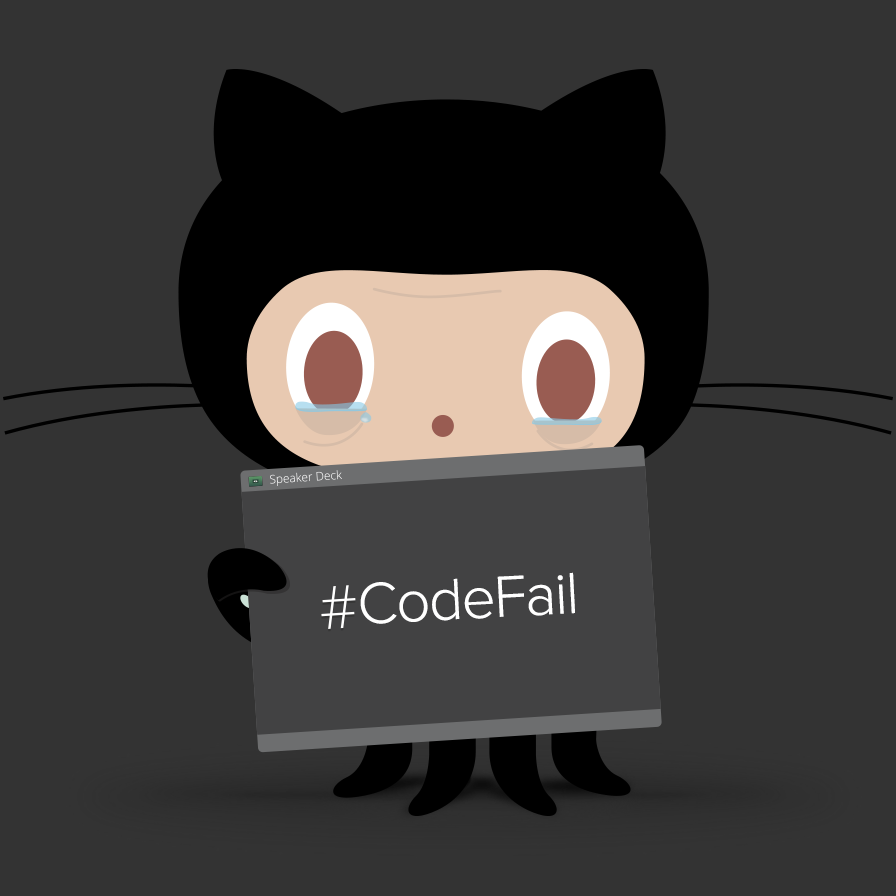
<style>
.page{position:relative;width:896px;height:896px;background:#333333}
.page>*{position:absolute;margin:0}
.t1{font:60px "ProximaNova-Light";letter-spacing:-0.025em;color:#ffffff}
</style>
<div class="page">
<p class="t1" style="left:360px;top:572px;width:215px;height:52px;rotate:-3deg">CodeFail</p>
</div>
